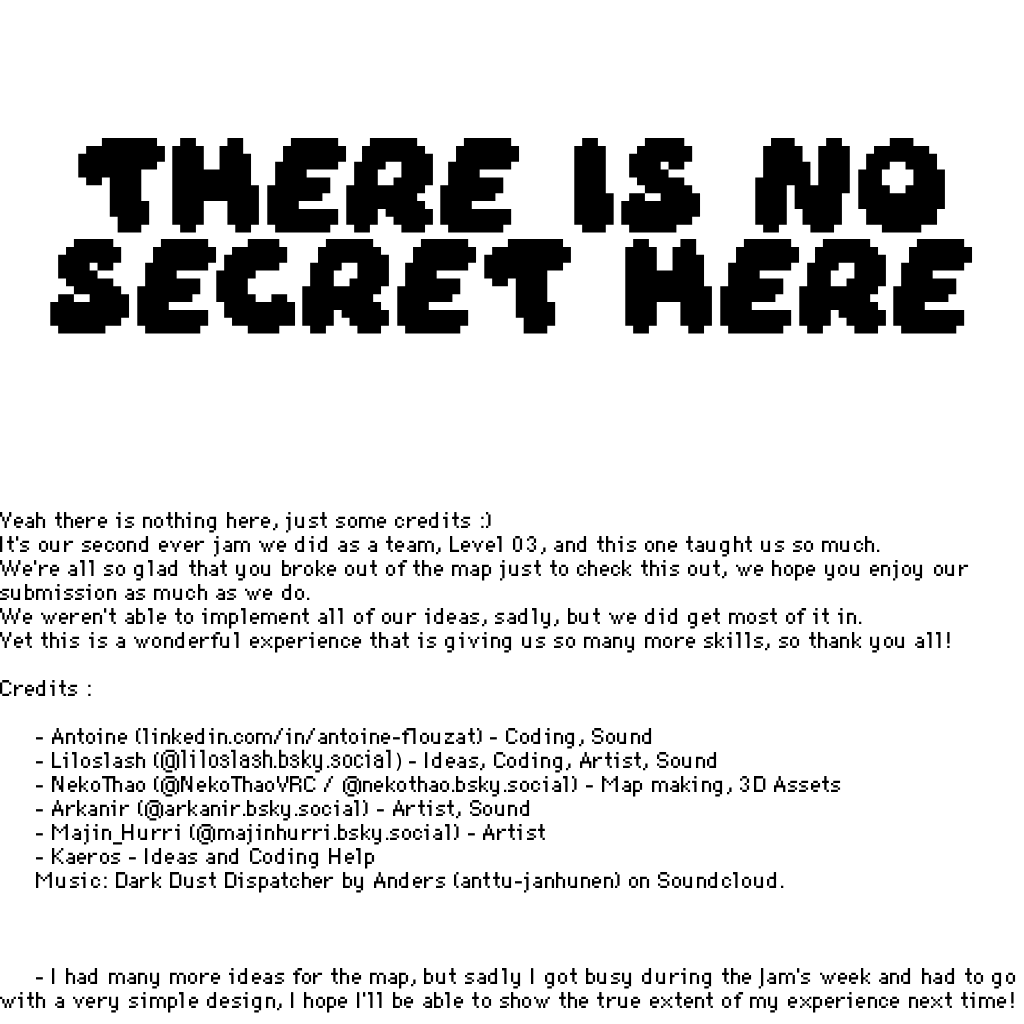
<style>
.page{position:relative;width:1024px;height:1024px;background:#ffffff}
.page>*{position:absolute;margin:0}
.t1{font:84px "Daydream";color:#000000}
.t2{font:89px "Daydream";color:#000000}
.t3{font:20px "DePixel-Klein";color:#000000}
.t4{font:20px "DePixel-Schmal";color:#000000}
.t5{font:20px "DejaVuSans";color:#000000}
</style>
<div class="page">
<p class="t1" style="left:50px;top:138px;width:923px;height:196px;text-align:center"><span class="t2"><br></span>There  is  no  secret  here</p>
<p class="t3" style="left:0px;top:512px;width:1016px;height:501px">Yeah there is nothing here, just some credits :)<br>It's our second ever jam we did as a team, Level 03, and this one taught us so much.<br>We're all so glad that you broke out of the map just to check this out, we hope you enjoy our submission as much as we do.<br>We weren't able to implement all of our ideas, sadly, but we did get most of it in.<br>Yet this is a wonderful experience that is giving us so many more skills, so thank you all!<br><br>Credits :<br><br> - Antoine (linkedin.com/in/antoine-flouzat) - Coding, Sound<br> - Liloslash (<span class="t4">@liloslash.bsky.social</span><span class="t5">‬) </span>- Ideas, Coding, Artist, Sound<br> - NekoThao (@NekoThaoVRC / @nekothao.bsky.social) - Map making, 3D Assets<br> - Arkanir (@arkanir.bsky.social) - Artist, Sound<br> - Majin_Hurri (@majinhurri.bsky.social) - Artist<br> - Kaeros - Ideas and Coding Help<br> Music: Dark Dust Dispatcher by Anders (anttu-janhunen) on Soundcloud.<br><br><br><br> - I had many more ideas for the map, but sadly I got busy during the Jam's week and had to go with a very simple design, I hope I'll be able to show the true extent of my experience next time!<br>                   -NekoThao</p>
</div>
